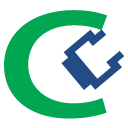
<style>
.page{position:relative;width:128px;height:128px;background:#ffffff}
.page>*{position:absolute;margin:0}
.t1{font:215.2px "MyriadPro-Regular";color:#00a651;scale:1.25 1}
.t2{font:112.1px "Fixedsys";color:#234c86;scale:0.8 1}
</style>
<div class="page">
<p class="t1" style="left:4px;top:10px;width:103px;height:109px">c</p>
<p class="t2" style="left:61px;top:29px;width:63px;height:61px;rotate:-40deg">c</p>
</div>
